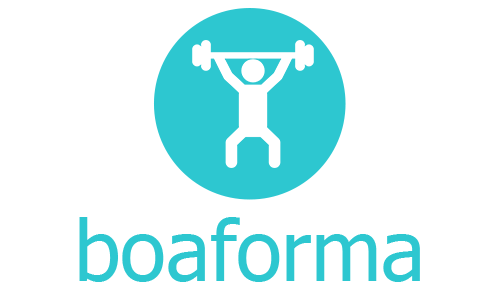
<style>
.page{position:relative;width:500px;height:300px;background:#ffffff}
.page>*{position:absolute;margin:0}
.t1{font:84.1px "Tahoma";color:#2dc7d0}
</style>
<div class="page">
<p class="t1" style="left:79px;top:217px;width:341px;height:65px">boaforma</p>
</div>
